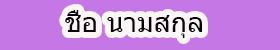
<style>
.page{position:relative;width:280px;height:50px;background:#c577e5}
.page>*{position:absolute;margin:0}
.t1{font:27.8px "Tahoma";color:#09020c}
</style>
<div class="page">
<p class="t1" style="left:65px;top:10px;width:137px;height:28px">ชื่่่่่่อ นามสกุล</p>
</div>
